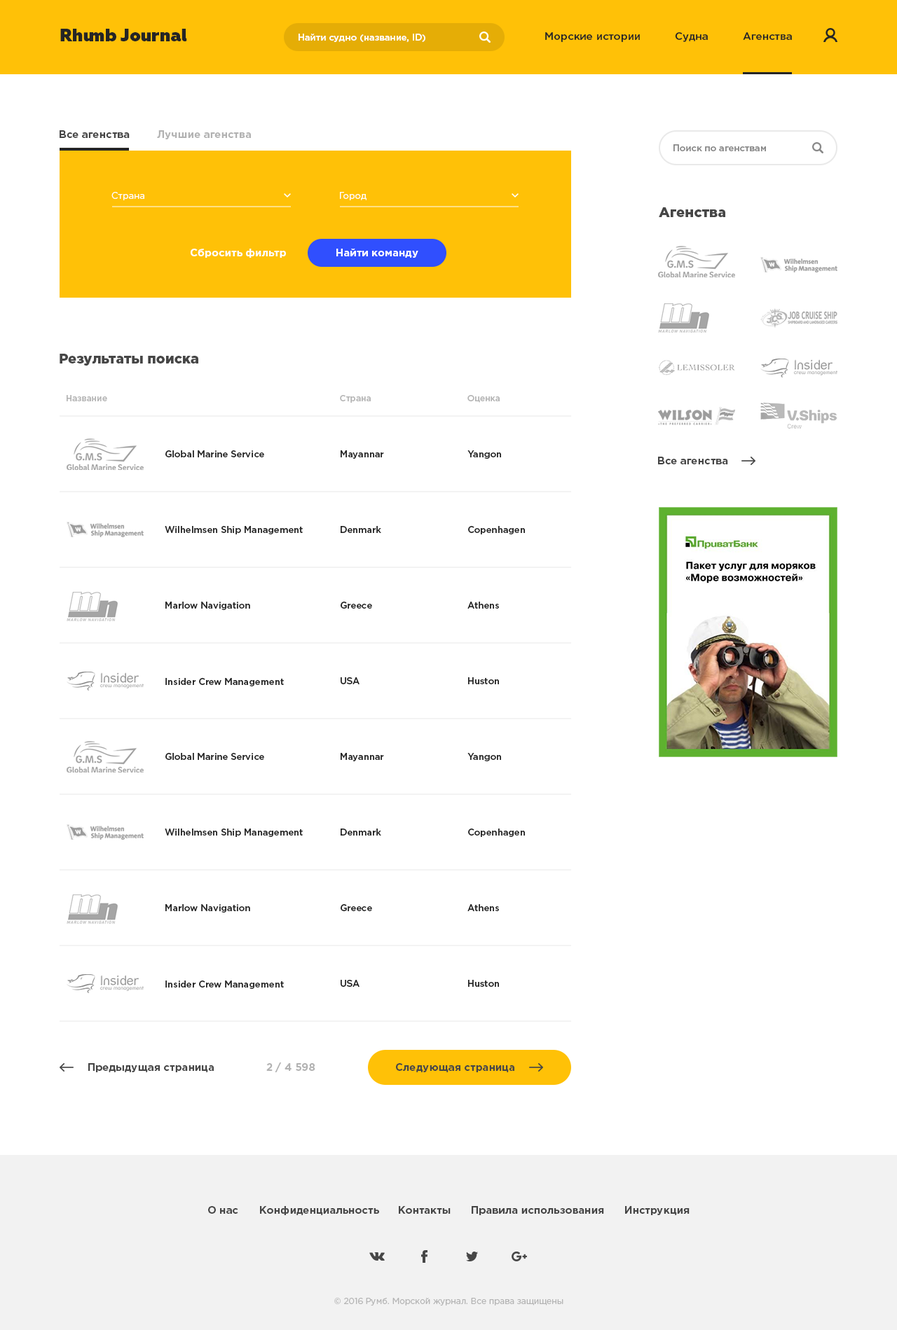
<style>
.page{position:relative;width:897px;height:1330px;background:#ffffff}
.page>*{position:absolute;margin:0}
.t1{font:17.5px "Geometria-Heavy";color:#252525}
.t2{font:9.1px "GothamPro-Medium";color:#ffffff}
.t3{font:10.5px "GothamPro-Medium";color:#252525}
.t4{font:10.5px "GothamPro-Bold";color:#464646}
.t5{font:10.5px "GothamPro-Bold";color:#b2b2b2}
.t6{font:9.1px "GothamPro-Medium";color:#898989}
.t7{font:9.1px "GothamPro";color:#ffffff}
.t8{font:14px "GothamPro-Black";color:#464646}
.t9{font:10.5px "GothamPro-Bold";color:#ffffff}
.t10{font:8.4px "GothamPro-Medium";color:#b4b4b4}
.t11{font:9.1px "GothamPro-Medium";color:#252525}
.t12{font:8.4px "GothamPro";color:#b4b4b4}
</style>
<div class="page">
<p class="t1" style="left:60px;top:29px;width:127px;height:12px">Rhumb Journal</p>
<p class="t2" style="left:298px;top:34px;width:127px;height:8px">Найти судно (название, ID)</p>
<p class="t3" style="left:545px;top:32px;width:94px;height:10px">Морские истории</p>
<p class="t3" style="left:674px;top:32px;width:33px;height:10px">Судна</p>
<p class="t3" style="left:742px;top:32px;width:49px;height:8px">Агенства</p>
<p class="t4" style="left:60px;top:130px;width:70px;height:8px">Все агенства</p>
<p class="t5" style="left:157px;top:130px;width:94px;height:9px">Лучшие агенства</p>
<p class="t6" style="left:673px;top:144px;width:93px;height:7px">Поиск по агенствам</p>
<p class="t7" style="left:111px;top:192px;width:33px;height:8px">Страна</p>
<p class="t7" style="left:340px;top:192px;width:26px;height:8px">Город</p>
<p class="t8" style="left:658px;top:207px;width:67px;height:10px">Агенства</p>
<p class="t9" style="left:191px;top:249px;width:95px;height:9px">Сбросить фильтр</p>
<p class="t9" style="left:336px;top:249px;width:82px;height:9px">Найти команду</p>
<p class="t8" style="left:60px;top:354px;width:138px;height:12px">Результаты поиска</p>
<p class="t10" style="left:67px;top:395px;width:40px;height:6px">Название</p>
<p class="t10" style="left:340px;top:395px;width:31px;height:8px">Страна</p>
<p class="t10" style="left:467px;top:395px;width:32px;height:8px">Оценка</p>
<p class="t11" style="left:165px;top:450px;width:99px;height:7px">Global Marine Service</p>
<p class="t11" style="left:340px;top:450px;width:44px;height:9px">Mayannar</p>
<p class="t11" style="left:467px;top:450px;width:34px;height:9px">Yangon</p>
<p class="t4" style="left:658px;top:457px;width:70px;height:7px">Все агенства</p>
<p class="t11" style="left:165px;top:526px;width:138px;height:8px">Wilhelmsen Ship Management</p>
<p class="t11" style="left:340px;top:526px;width:41px;height:7px">Denmark</p>
<p class="t11" style="left:468px;top:526px;width:57px;height:8px">Copenhagen</p>
<p class="t11" style="left:165px;top:602px;width:85px;height:8px">Marlow Navigation</p>
<p class="t11" style="left:340px;top:602px;width:32px;height:7px">Greece</p>
<p class="t11" style="left:467px;top:602px;width:32px;height:7px">Athens</p>
<p class="t11" style="left:165px;top:678px;width:119px;height:8px">Insider Crew Management</p>
<p class="t11" style="left:340px;top:677px;width:19px;height:7px">USA</p>
<p class="t11" style="left:468px;top:677px;width:31px;height:7px">Huston</p>
<p class="t11" style="left:165px;top:753px;width:99px;height:7px">Global Marine Service</p>
<p class="t11" style="left:340px;top:753px;width:44px;height:8px">Mayannar</p>
<p class="t11" style="left:467px;top:753px;width:34px;height:8px">Yangon</p>
<p class="t11" style="left:165px;top:829px;width:138px;height:8px">Wilhelmsen Ship Management</p>
<p class="t11" style="left:340px;top:829px;width:41px;height:7px">Denmark</p>
<p class="t11" style="left:468px;top:829px;width:57px;height:8px">Copenhagen</p>
<p class="t11" style="left:165px;top:904px;width:85px;height:9px">Marlow Navigation</p>
<p class="t11" style="left:340px;top:904px;width:32px;height:7px">Greece</p>
<p class="t11" style="left:467px;top:904px;width:32px;height:7px">Athens</p>
<p class="t11" style="left:165px;top:981px;width:119px;height:8px">Insider Crew Management</p>
<p class="t11" style="left:340px;top:980px;width:19px;height:7px">USA</p>
<p class="t11" style="left:468px;top:980px;width:31px;height:7px">Huston</p>
<p class="t4" style="left:88px;top:1063px;width:126px;height:9px">Предыдущая страница</p>
<p class="t5" style="left:266px;top:1063px;width:49px;height:9px">2 / 4 598</p>
<p class="t4" style="left:396px;top:1063px;width:118px;height:9px">Следующая страница</p>
<p class="t4" style="left:208px;top:1206px;width:30px;height:8px">О нас</p>
<p class="t4" style="left:260px;top:1206px;width:119px;height:9px">Конфиденциальность</p>
<p class="t4" style="left:399px;top:1206px;width:51px;height:8px">Контакты</p>
<p class="t4" style="left:471px;top:1206px;width:133px;height:9px">Правила использования</p>
<p class="t4" style="left:625px;top:1206px;width:64px;height:9px">Инструкция</p>
<p class="t12" style="left:334px;top:1298px;width:229px;height:8px">© 2016 Румб. Морской журнал. Все права защищены</p>
</div>
